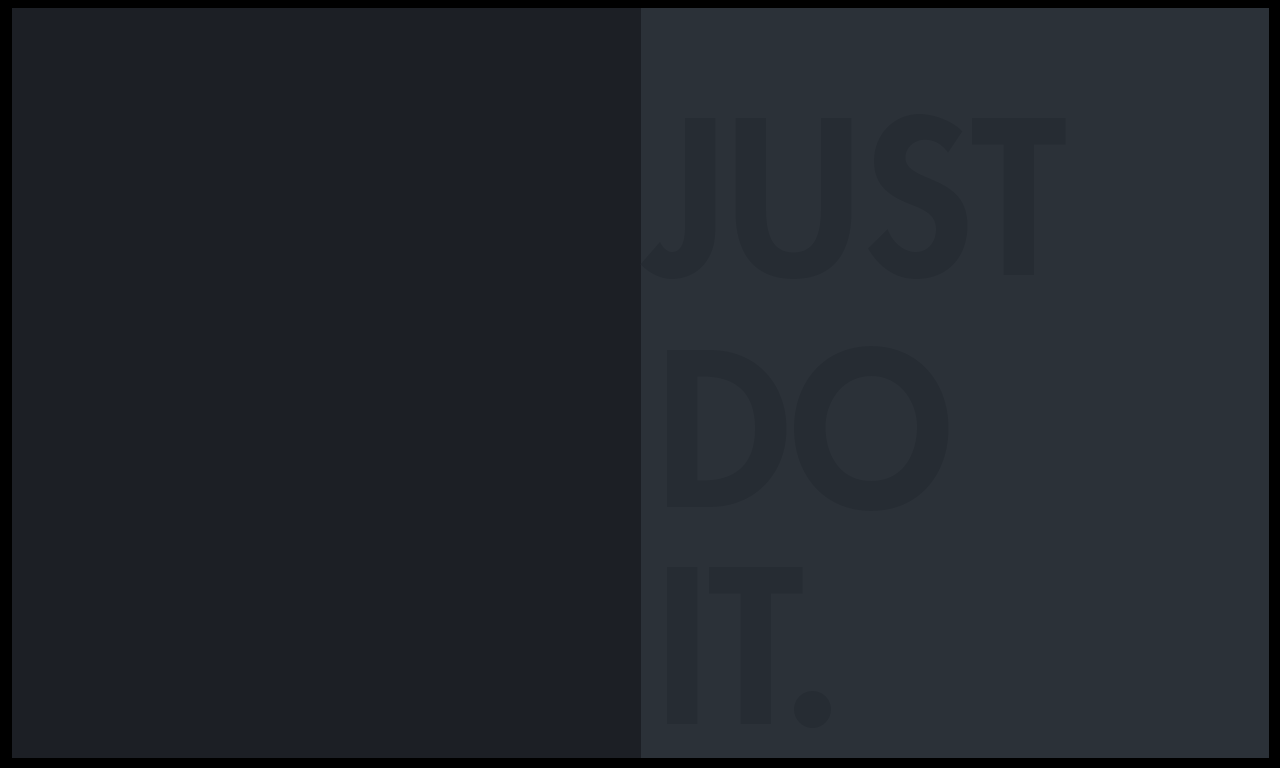
<style>
.page{position:relative;width:1280px;height:768px;background:#1c1f25}
.page>*{position:absolute;margin:0}
.t1{font:207.7px "FuturaStd-Heavy";color:#262c33}
</style>
<div class="page">
<p class="t1" style="left:640px;top:114px;width:426px;height:165px">JUST</p>
<p class="t1" style="left:667px;top:346px;width:282px;height:165px">DO</p>
<p class="t1" style="left:667px;top:567px;width:164px;height:161px">IT.</p>
</div>
